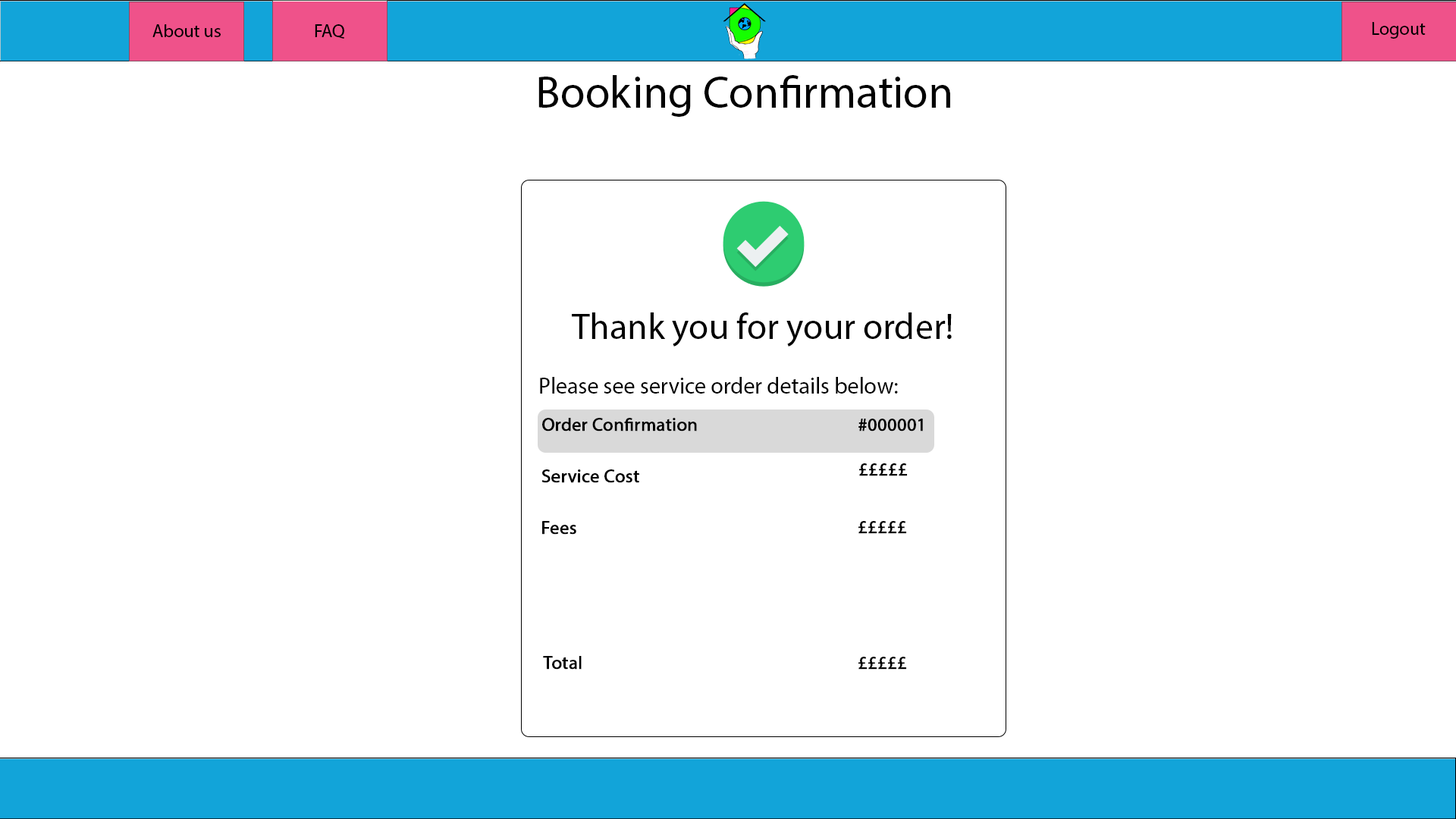
<style>
.page{position:relative;width:1456px;height:819px;background:#ffffff}
.page>*{position:absolute;margin:0}
.t1{font:18.2px "MyriadPro-Regular";color:#000000}
.t2{font:45.5px "MyriadPro-Regular";color:#000000}
.t3{font:36.4px "MyriadPro-Regular";color:#000000}
.t4{font:22.7px "MyriadPro-Regular";color:#000000}
.t5{font:18.2px "MyriadPro-Regular";color:#000000;font-weight:bold}
</style>
<div class="page">
<p class="t1" style="left:152px;top:24px;width:69px;height:13px">About us</p>
<p class="t1" style="left:315px;top:24px;width:29px;height:15px">FAQ</p>
<p class="t1" style="left:1372px;top:22px;width:54px;height:17px">Logout</p>
<p class="t2" style="left:538px;top:75px;width:412px;height:42px">Booking Confirmation</p>
<p class="t3" style="left:572px;top:312px;width:380px;height:35px">Thank you for your order!</p>
<p class="t4" style="left:540px;top:377px;width:358px;height:17px">Please see service order details below:</p>
<p class="t5" style="left:542px;top:418px;width:155px;height:13px">Order Confirmation</p>
<p class="t5" style="left:858px;top:419px;width:65px;height:12px">#000001</p>
<p class="t5" style="left:541px;top:469px;width:98px;height:14px">Service Cost</p>
<p class="t5" style="left:859px;top:463px;width:49px;height:13px">£££££</p>
<p class="t5" style="left:542px;top:521px;width:34px;height:14px">Fees</p>
<p class="t5" style="left:858px;top:521px;width:49px;height:13px">£££££</p>
<p class="t5" style="left:543px;top:656px;width:39px;height:14px">Total</p>
<p class="t5" style="left:858px;top:657px;width:49px;height:13px">£££££</p>
</div>
